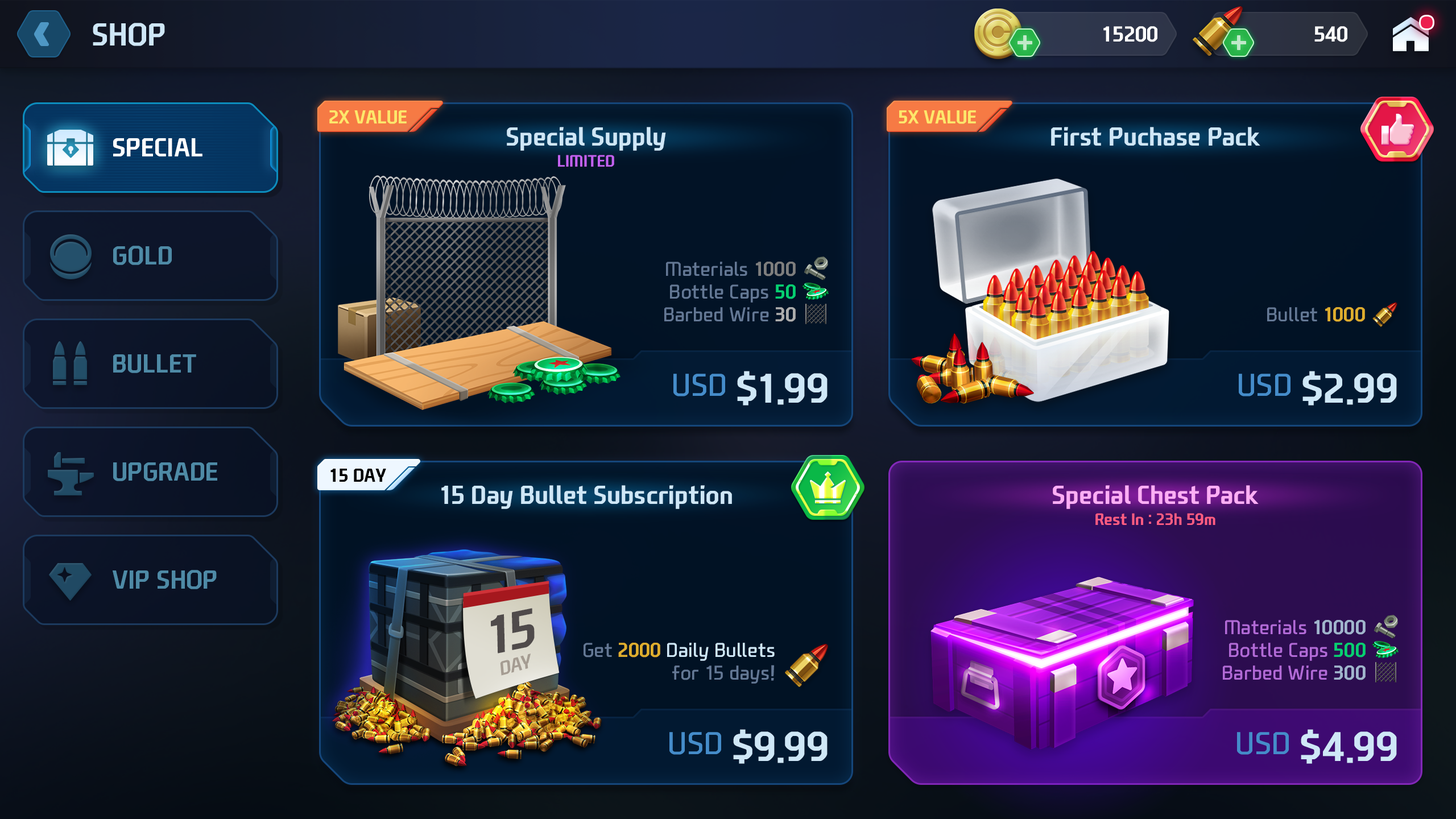
<style>
.page{position:relative;width:1456px;height:819px}
.page>*{position:absolute;margin:0}
.t1{font:30.6px "NEXONFootballGothicB";color:#cfe7f7;text-transform:uppercase}
.t2{font:20.7px "NEXONFootballGothicB";color:#ffffff;text-transform:uppercase}
.t3{font:17.9px "NEXONFootballGothicB";color:#fde76b;text-transform:uppercase}
.t4{font:25px "NEXONFootballGothicB";color:#cfe7f7}
.t5{font:25px "NEXONFootballGothicB";color:#ffffff;text-transform:uppercase}
.t6{font:15.9px "NEXONFootballGothicB";color:#c261ef;text-transform:uppercase}
.t7{font:25px "NEXONFootballGothicB";color:#4e8aa6;text-transform:uppercase}
.t8{font:19.3px/22.7px "NEXONFootballGothicL";color:#647895}
.t9{font:19.3px/22.7px "NEXONFootballGothicB";color:#7e7e7e}
.t10{font:19.3px/22.7px "NEXONFootballGothicB";color:#06d071}
.t11{font:19.3px/22.7px "NEXONFootballGothicB";color:#adadad}
.t12{font:19.3px "NEXONFootballGothicL";color:#647895}
.t13{font:19.3px "NEXONFootballGothicB";color:#dead2e}
.t14{font:39.8px "NEXONFootballGothicB";color:#cfe7f7}
.t15{font:30.7px "NEXONFootballGothicL";color:#458cca}
.t16{font:17.9px "NEXONFootballGothicB";color:#000000;text-transform:uppercase}
.t17{font:25px "NEXONFootballGothicB";color:#ffaef5}
.t18{font:15.9px "NEXONFootballGothicB";color:#ff5c82}
.t19{font:51.2px "NEXONFootballGothicB";color:#504b4b;font-style:italic}
.t20{font:19.3px/22.7px "NEXONFootballGothicL";color:#b26ad7}
.t21{font:19.3px/22.7px "NEXONFootballGothicB";color:#a1b5cd}
.t22{font:18.6px "NEXONFootballGothicB";color:#a59c92;text-transform:uppercase;font-style:italic}
.t23{font:19.3px/22.7px "NEXONFootballGothicL";color:#cfe7f7}
.t24{font:19.3px/22.7px "NEXONFootballGothicB";color:#dead2e}
</style>
<div class="page">
<p class="t1" style="left:93px;top:23px;width:72px;height:23px">shop</p>
<p class="t2" style="left:1103px;top:26px;width:54px;height:16px">15200</p>
<p class="t2" style="left:1314px;top:26px;width:33px;height:16px">540</p>
<p class="t3" style="left:329px;top:110px;width:78px;height:14px">2x Value</p>
<p class="t3" style="left:899px;top:110px;width:77px;height:14px">5x Value</p>
<p class="t4" style="left:507px;top:127px;width:159px;height:24px">Special Supply</p>
<p class="t4" style="left:1051px;top:127px;width:209px;height:19px">First Puchase Pack</p>
<p class="t5" style="left:113px;top:138px;width:89px;height:18px">Special</p>
<p class="t5" style="left:113px;top:138px;width:89px;height:18px">Special</p>
<p class="t6" style="left:558px;top:155px;width:56px;height:12px">Limited</p>
<p class="t7" style="left:113px;top:246px;width:59px;height:19px">Gold</p>
<p class="t8" style="left:664px;top:262px;width:132px;height:60px;text-align:right">Materials <span class="t9">1000<br></span>Bottle Caps <span class="t10">50<br></span>Barbed Wire <span class="t11">30</span></p>
<p class="t12" style="left:1267px;top:307px;width:98px;height:15px">Bullet <span class="t13">1000</span></p>
<p class="t7" style="left:113px;top:354px;width:83px;height:19px">Bullet</p>
<p class="t14" style="left:673px;top:371px;width:155px;height:35px"><span class="t15">USD </span>$1.99</p>
<p class="t14" style="left:1239px;top:371px;width:158px;height:35px"><span class="t15">USD </span>$2.99</p>
<p class="t7" style="left:113px;top:462px;width:104px;height:19px">Upgrade</p>
<p class="t16" style="left:330px;top:469px;width:56px;height:13px">15 day</p>
<p class="t4" style="left:441px;top:485px;width:291px;height:24px">15 Day Bullet Subscription</p>
<p class="t17" style="left:1053px;top:485px;width:206px;height:24px">Special Chest Pack</p>
<p class="t18" style="left:1095px;top:513px;width:120px;height:12px">Rest In : 23h 59m</p>
<p class="t7" style="left:113px;top:570px;width:104px;height:19px">VIP Shop</p>
<p class="t19" style="left:491px;top:608px;width:44px;height:45px;rotate:-11deg">15</p>
<p class="t20" style="left:1223px;top:620px;width:143px;height:60px;text-align:right">Materials <span class="t21">10000<br></span>Bottle Caps <span class="t10">500<br></span>Barbed Wire <span class="t21">300</span></p>
<p class="t22" style="left:500px;top:653px;width:31px;height:23px;rotate:-15deg">DAY</p>
<p class="t23" style="left:584px;top:643px;width:191px;height:41px;text-align:right"><span class="t8">Get </span><span class="t24">2000 </span>Daily Bullets<br><span class="t8"> for 15 days!</span></p>
<p class="t14" style="left:669px;top:729px;width:159px;height:35px"><span class="t15">USD </span>$9.99</p>
<p class="t14" style="left:1237px;top:729px;width:160px;height:35px"><span class="t15">USD </span>$4.99</p>
</div>
